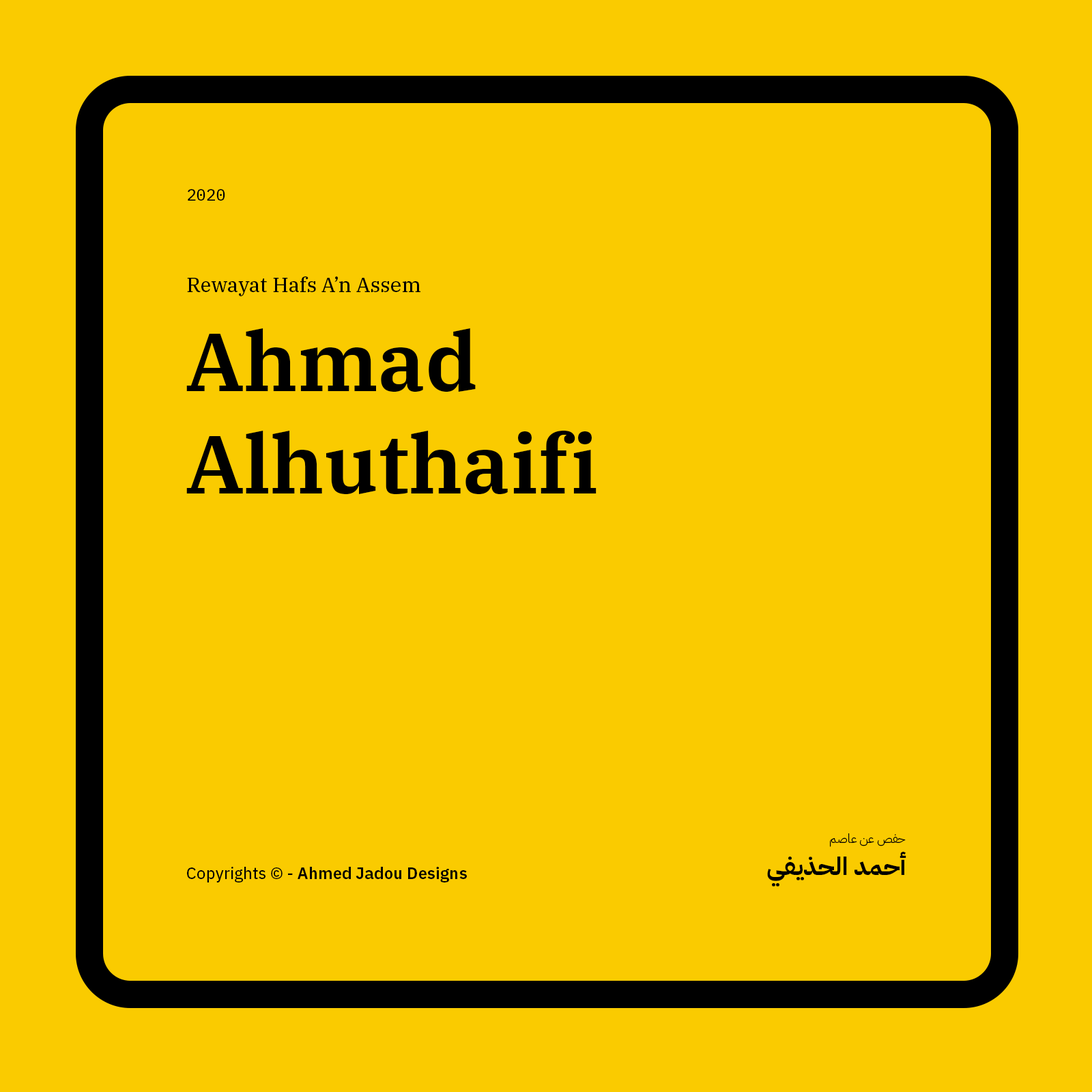
<style>
.page{position:relative;width:1092px;height:1092px;background:#facb00}
.page>*{position:absolute;margin:0}
.t1{font:16.4px "IBMPlexMono-Text";color:#000000}
.t2{font:20.5px "IBMPlexSerif-Text";color:#000000}
.t3{font:81.9px/102.7px "IBMPlexSerif-SemiBold";color:#000000}
.t4{font:12.3px "IBMPlexArabic-Light";color:#000000}
.t5{font:24.6px "IBMPlexArabic-Bold";color:#000000}
.t6{font:16.4px "IBMPlexSans-SemiBold";color:#000000}
.t7{font:16.4px "IBMPlexSans-Text";color:#000000}
</style>
<div class="page">
<p class="t1" style="left:188px;top:189px;width:37px;height:12px">2020</p>
<p class="t2" style="left:187px;top:276px;width:233px;height:20px">Rewayat Hafs A’n Assem</p>
<p class="t3" style="left:186px;top:328px;width:410px;height:166px">Ahmad Alhuthaifi</p>
<p class="t4" style="left:830px;top:833px;width:76px;height:14px">حفص عن عاصم</p>
<p class="t5" style="left:767px;top:852px;width:139px;height:35px">أحمد الحذيفي</p>
<p class="t6" style="left:187px;top:867px;width:280px;height:15px"><span class="t7">Copyrights © - </span>Ahmed Jadou Designs</p>
</div>
